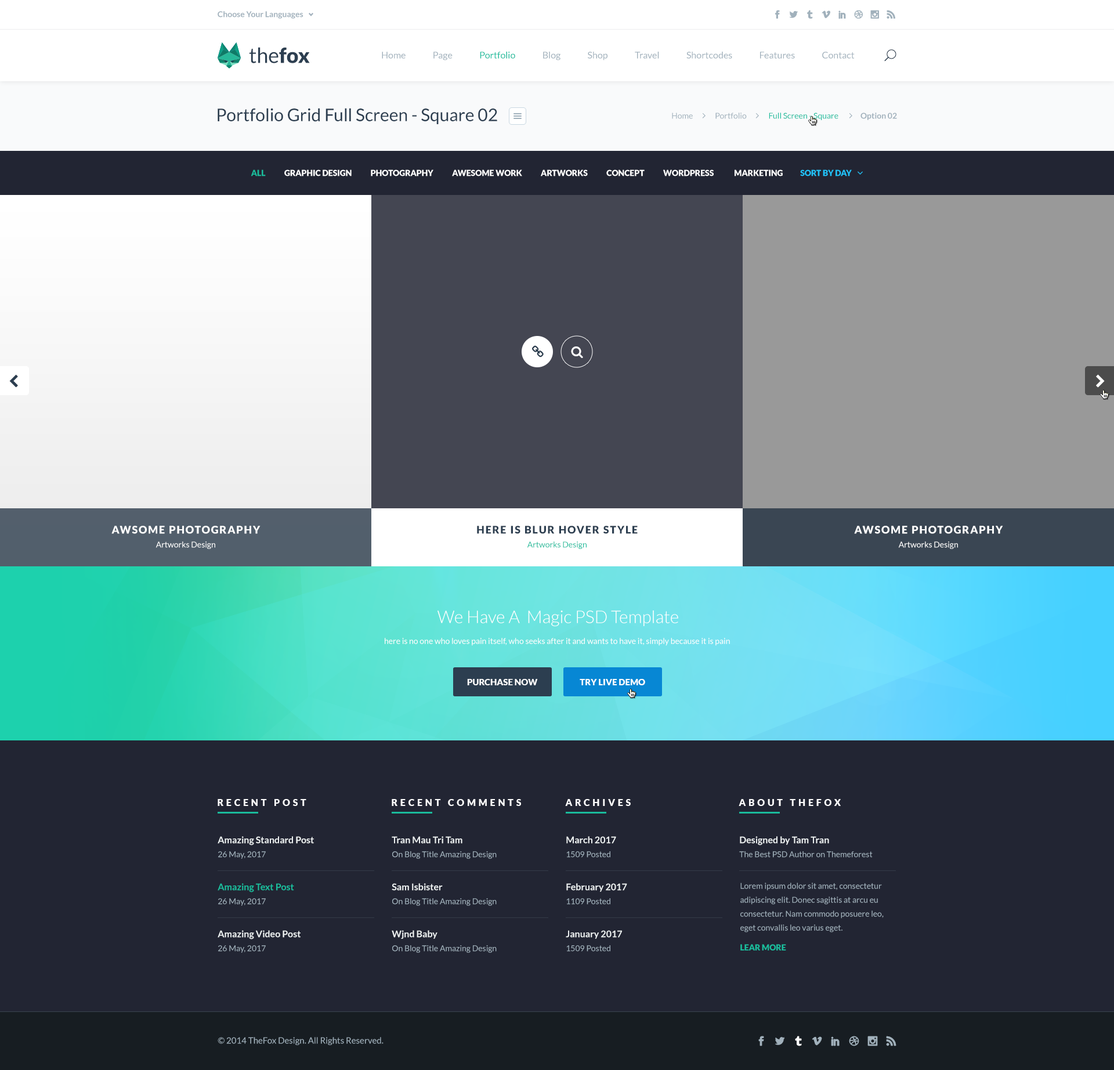
<style>
.page{position:relative;width:1114px;height:1070px;background:#222533}
.page>*{position:absolute;margin:0}
.t1{font:8.1px "Lato-Bold";color:#a1b1bc}
.t2{font:20.9px "Lato-Regular";color:#2c3e50}
.t3{font:20.9px "Lato-Black";color:#2c3e50}
.t4{font:9.3px "Lato-Regular";color:#a1b1bc}
.t5{font:9.3px "Lato-Regular";color:#1abc9c}
.t6{font:17.4px "Lato-Regular";color:#2c3e50}
.t7{font:8.1px "Lato-Regular";color:#a1b1bc}
.t8{font:8.1px "Lato-Regular";color:#1abc9c}
.t9{font:8.1px "Lato-Black";color:#ffffff;text-transform:uppercase}
.t10{font:8.1px "Lato-Black";color:#1abc9c;text-transform:uppercase}
.t11{font:8.1px "Lato-Black";color:#21c2f8;text-transform:uppercase}
.t12{font:10.4px/13.9px "Lato-Black";letter-spacing:0.1em;color:#ffffff}
.t13{font:8.1px/13.9px "Lato-Regular";color:#ffffff}
.t14{font:10.4px/13.9px "Lato-Black";letter-spacing:0.1em;color:#2c3e50}
.t15{font:8.1px/13.9px "Lato-Regular";color:#1abc9c}
.t16{font:17.4px "Lato-Light";color:#ffffff}
.t17{font:8.1px "Lato-Regular";color:#ffffff}
.t18{font:8.7px "Lato-Black";color:#ffffff;text-transform:uppercase}
.t19{font:9.3px "Lato-Black";letter-spacing:0.3em;color:#ffffff}
.t20{font:9.3px/13.9px "Lato-Bold";color:#ecf0f1}
.t21{font:8.1px/13.9px "Lato-Regular";color:#a1b1bc}
.t22{font:9.3px/13.9px "Lato-Bold";color:#1abc9c}
.t23{font:8.1px "Lato-Black";color:#1abc9c}
.t24{font:8.7px "Lato-Regular";color:#a1b1bc}
</style>
<div class="page">
<p class="t1" style="left:218px;top:11px;width:86px;height:8px">Choose Your Languages</p>
<p class="t2" style="left:249px;top:47px;width:61px;height:16px">the<span class="t3">fox</span></p>
<p class="t4" style="left:382px;top:52px;width:473px;height:8px">Home               Page               <span class="t5">Portfolio</span>               Blog               Shop               Travel               Shortcodes               Features               Contact</p>
<p class="t6" style="left:218px;top:108px;width:279px;height:16px">Portfolio Grid Full Screen - Square 02</p>
<p class="t7" style="left:672px;top:113px;width:225px;height:7px">Home              Portfolio              <span class="t8">Full Screen - Square              </span><span class="t1">Option 02</span></p>
<p class="t9" style="left:251px;top:169px;width:601px;height:7px"><span class="t10">All</span>            Graphic Design            Photography            Awesome Work            Artworks            Concept            Wordpress             Marketing           <span class="t11">Sort by day</span></p>
<p class="t12" style="left:111px;top:526px;width:150px;height:23px;text-align:center">AWSOME PHOTOGRAPHY<br><span class="t13">Artworks Design</span></p>
<p class="t14" style="left:477px;top:526px;width:161px;height:23px;text-align:center">HERE IS BLUR HOVER STYLE<br><span class="t15">Artworks Design</span></p>
<p class="t12" style="left:854px;top:526px;width:149px;height:23px;text-align:center">AWSOME PHOTOGRAPHY<br><span class="t13">Artworks Design</span></p>
<p class="t16" style="left:438px;top:611px;width:240px;height:16px">We Have A  Magic PSD Template</p>
<p class="t17" style="left:385px;top:638px;width:345px;height:8px">here is no one who loves pain itself, who seeks after it and wants to have it, simply because it is pain</p>
<p class="t18" style="left:467px;top:679px;width:71px;height:6px">PURCHASE NOW</p>
<p class="t18" style="left:580px;top:679px;width:65px;height:6px">TRY LIVE DEMO</p>
<p class="t19" style="left:218px;top:799px;width:88px;height:7px">RECENT POST</p>
<p class="t19" style="left:392px;top:799px;width:129px;height:7px">RECENT COMMENTS</p>
<p class="t19" style="left:565px;top:799px;width:66px;height:7px">ARCHIVES</p>
<p class="t19" style="left:739px;top:799px;width:102px;height:7px">ABOUT THEFOX</p>
<p class="t20" style="left:218px;top:836px;width:96px;height:23px">Amazing Standard Post<br><span class="t21">26 May, 2017</span></p>
<p class="t21" style="left:392px;top:836px;width:105px;height:23px"><span class="t20">Tran Mau Tri Tam<br></span>On Blog Title Amazing Design</p>
<p class="t21" style="left:566px;top:836px;width:50px;height:22px"><span class="t20">March 2017<br></span>1509 Posted</p>
<p class="t21" style="left:739px;top:836px;width:134px;height:22px"><span class="t20">Designed by Tam Tran<br></span>The Best PSD Author on Themeforest</p>
<p class="t22" style="left:218px;top:883px;width:76px;height:23px">Amazing Text Post<br><span class="t21">26 May, 2017</span></p>
<p class="t21" style="left:392px;top:883px;width:105px;height:23px"><span class="t20">Sam Isbister<br></span>On Blog Title Amazing Design</p>
<p class="t20" style="left:566px;top:883px;width:61px;height:22px">February 2017<br><span class="t21">1109 Posted</span></p>
<p class="t21" style="left:741px;top:883px;width:143px;height:50px">Lorem ipsum dolor sit amet, consectetur adipiscing elit. Donec sagittis at arcu eu consectetur. Nam commodo posuere leo, eget convallis leo varius eget.</p>
<p class="t20" style="left:218px;top:930px;width:83px;height:23px">Amazing Video Post<br><span class="t21">26 May, 2017</span></p>
<p class="t21" style="left:392px;top:930px;width:105px;height:23px"><span class="t20">Wjnd Baby<br></span>On Blog Title Amazing Design</p>
<p class="t20" style="left:566px;top:930px;width:56px;height:22px">January 2017<br><span class="t21">1509 Posted</span></p>
<p class="t23" style="left:741px;top:944px;width:45px;height:7px">LEAR MORE</p>
<p class="t24" style="left:218px;top:1037px;width:166px;height:8px">© 2014 TheFox Design. All Rights Reserved.</p>
</div>
